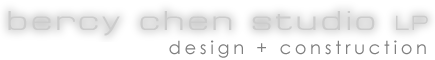
<style>
.page{position:relative;width:435px;height:60px;background:#ffffff}
.page>*{position:absolute;margin:0}
.t1{font:24px "SpaceOutRegularSWFTE";letter-spacing:0.2em;color:#cccccc}
.t2{font:18px "SpaceOutRegularSWFTE";letter-spacing:0.2em;color:#cccccc}
.t3{font:18px "CenturyGothic";letter-spacing:0.2em;color:#7f7f7f}
</style>
<div class="page">
<p class="t1" style="left:8px;top:11px;width:420px;height:25px">bercy chen studio <span class="t2">LP</span></p>
<p class="t3" style="left:169px;top:40px;width:257px;height:18px">design + construction</p>
</div>
